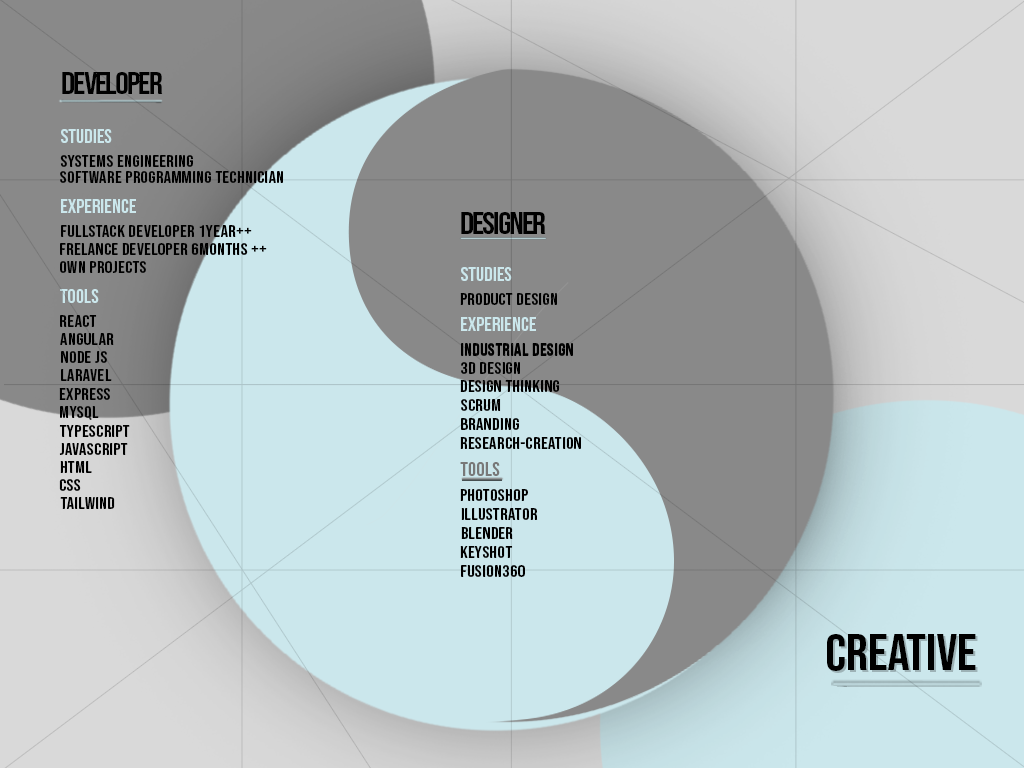
<style>
.page{position:relative;width:1024px;height:768px;background:#cbe7ec}
.page>*{position:absolute;margin:0}
.t1{font:31.3px "BebasNeue-Regular";letter-spacing:-0.06em;color:#000000;scale:1.11 1}
.t2{font:18.8px "BebasNeue-Regular";color:#cbe7ec;scale:1.11 1}
.t3{font:16.7px "BebasNeue-Regular";letter-spacing:0.02em;color:#000000;scale:1.11 1}
.t4{font:18.8px "BebasNeue-Regular";color:#787878;scale:1.11 1}
.t5{font:50.2px "BebasNeue-Regular";letter-spacing:-0.01em;color:#000000;scale:1.11 1}
.t6{font:50.2px "BebasNeue-Regular";letter-spacing:-0.01em;scale:1.11 1}
</style>
<div class="page">
<p class="t1" style="left:62px;top:72px;width:101px;height:22px">developer</p>
<p class="t2" style="left:61px;top:129px;width:51px;height:14px">studies</p>
<p class="t3" style="left:60px;top:155px;width:133px;height:12px">Systems engineering</p>
<p class="t3" style="left:60px;top:171px;width:223px;height:12px">Software programming technician</p>
<p class="t2" style="left:61px;top:199px;width:75px;height:14px">experience</p>
<p class="t1" style="left:461px;top:212px;width:85px;height:22px">designer</p>
<p class="t3" style="left:61px;top:225px;width:191px;height:12px">fullstack developer 1year++</p>
<p class="t3" style="left:60px;top:243px;width:207px;height:12px">frelance developer 6months ++</p>
<p class="t3" style="left:60px;top:261px;width:86px;height:12px">own projects</p>
<p class="t2" style="left:461px;top:267px;width:51px;height:14px">studies</p>
<p class="t2" style="left:60px;top:289px;width:39px;height:14px">tools</p>
<p class="t3" style="left:460px;top:293px;width:97px;height:12px">product design</p>
<p class="t3" style="left:60px;top:315px;width:37px;height:12px">react</p>
<p class="t2" style="left:461px;top:317px;width:75px;height:14px">experience</p>
<p class="t3" style="left:60px;top:333px;width:54px;height:12px">angular</p>
<p class="t3" style="left:61px;top:351px;width:46px;height:12px">node js</p>
<p class="t3" style="left:461px;top:343px;width:112px;height:12px">industrial design</p>
<p class="t3" style="left:461px;top:344px;width:112px;height:12px">industrial design</p>
<p class="t3" style="left:461px;top:362px;width:59px;height:12px">3d design</p>
<p class="t3" style="left:61px;top:369px;width:51px;height:12px">laravel</p>
<p class="t3" style="left:59px;top:388px;width:51px;height:12px">express</p>
<p class="t3" style="left:460px;top:380px;width:100px;height:12px">Design Thinking</p>
<p class="t3" style="left:461px;top:399px;width:40px;height:12px">scrum</p>
<p class="t3" style="left:60px;top:406px;width:39px;height:14px">Mysql</p>
<p class="t3" style="left:59px;top:425px;width:71px;height:12px">typescript</p>
<p class="t3" style="left:461px;top:418px;width:58px;height:12px">branding</p>
<p class="t3" style="left:460px;top:437px;width:121px;height:12px">Research-Creation</p>
<p class="t3" style="left:59px;top:443px;width:69px;height:12px">javascript</p>
<p class="t3" style="left:60px;top:461px;width:32px;height:12px">html</p>
<p class="t4" style="left:460px;top:462px;width:40px;height:14px">tools</p>
<p class="t3" style="left:59px;top:479px;width:22px;height:12px">css</p>
<p class="t3" style="left:60px;top:497px;width:55px;height:12px">tailwind</p>
<p class="t3" style="left:460px;top:489px;width:68px;height:12px">photoshop</p>
<p class="t3" style="left:461px;top:508px;width:77px;height:12px">illustrator</p>
<p class="t3" style="left:461px;top:527px;width:52px;height:12px">blender</p>
<p class="t3" style="left:460px;top:546px;width:53px;height:12px">keyshot</p>
<p class="t3" style="left:461px;top:565px;width:64px;height:12px">fusion360</p>
<p class="t5" style="left:827px;top:634px;width:149px;height:37px">creative</p>
<p class="t6" style="left:829px;top:636px;width:149px;height:37px">creative</p>
</div>
